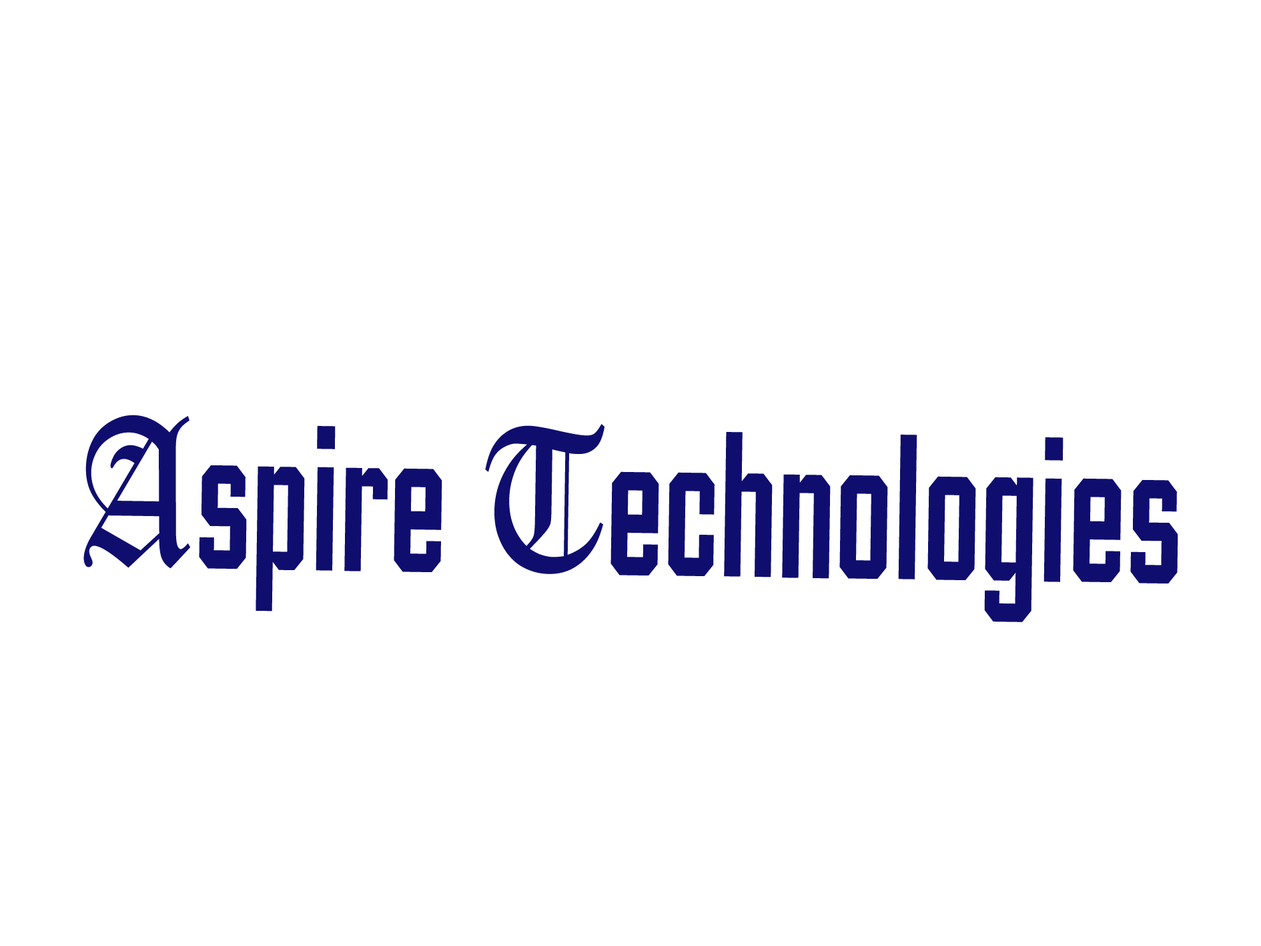
<style>
.page{position:relative;width:1261px;height:946px;background:#ffffff}
.page>*{position:absolute;margin:0}
.t1{font:206px "PinkSans-100";color:#0f0e6f;scale:0.78 1}
.t2{font:206px "OldEnglishTextMT";color:#0f0e6f;scale:0.78 1}
</style>
<div class="page">
<p class="t1" style="left:83px;top:414px;width:1095px;height:208px;rotate:1deg"><span class="t2">A</span>spire <span class="t2">T</span>echnologies</p>
</div>
